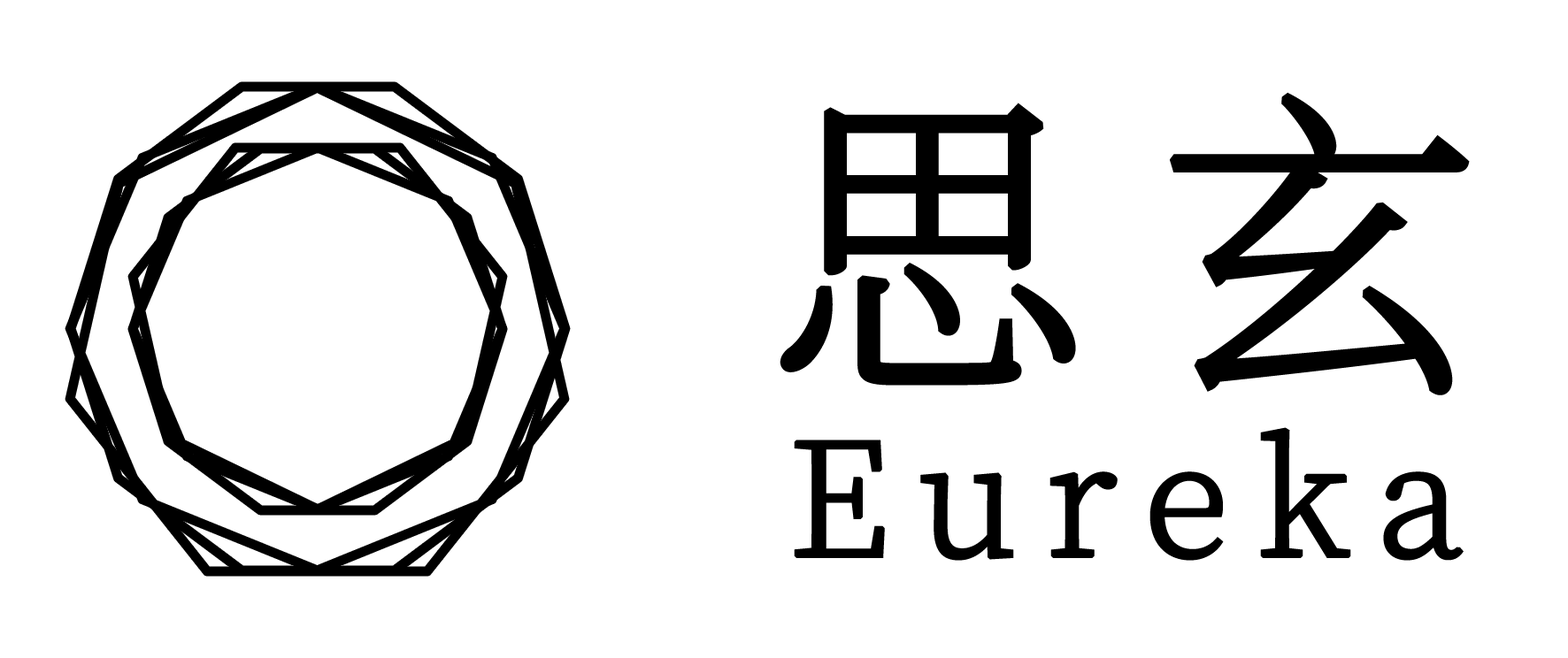
<style>
.page{position:relative;width:1568px;height:658px;background:#ffffff}
.page>*{position:absolute;margin:0}
.t1{font:157.4px "SourceHanSerifCN-ExtraLight";letter-spacing:0.15em;color:#000000;font-weight:bold}
.t2{font:318.8px "SourceHanSerifCN-ExtraLight";letter-spacing:0.2em;color:#000000;font-weight:bold}
</style>
<div class="page">
<p class="t1" style="left:780px;top:92px;width:690px;height:469px;text-align:center"><span class="t2">思玄<br></span>Eureka</p>
</div>
